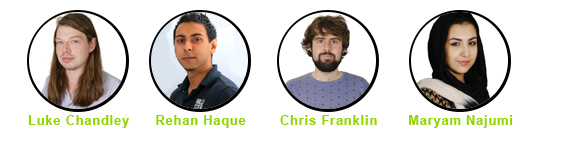
<style>
.page{position:relative;width:563px;height:150px;background:#ffffff}
.page>*{position:absolute;margin:0}
.t1{font:12.5px "Arial-BoldMT";letter-spacing:0.08em;color:#92d400}
</style>
<div class="page">
<p class="t1" style="left:28px;top:115px;width:101px;height:13px">Luke Chandley</p>
<p class="t1" style="left:156px;top:115px;width:90px;height:13px">Rehan Haque</p>
<p class="t1" style="left:280px;top:115px;width:97px;height:10px">Chris Franklin</p>
<p class="t1" style="left:409px;top:115px;width:104px;height:13px">Maryam Najumi</p>
</div>
